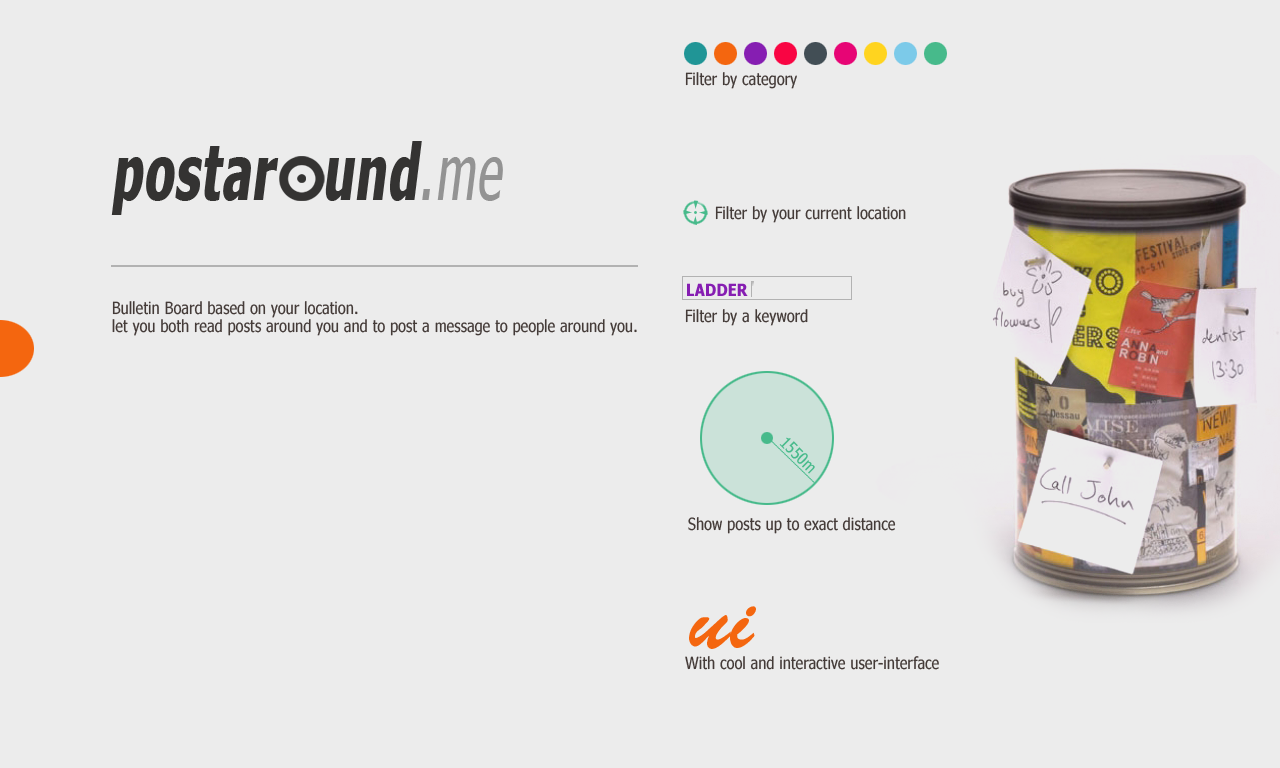
<style>
.page{position:relative;width:1280px;height:768px;background:#ececec}
.page>*{position:absolute;margin:0}
.t1{font:16.7px "Nina";letter-spacing:0.012em;color:#443b38}
.t2{font:16.7px "Nina-Bold";letter-spacing:0.012em;color:#861eb2}
.t3{font:16.7px/18px "Nina";letter-spacing:0.012em;color:#443b38}
.t4{font:16.7px "Nina";letter-spacing:0.012em;color:#47ba8b}
.t5{font:83.3px "BrushScriptStd";letter-spacing:0.012em;color:#f4660f}
</style>
<div class="page">
<p class="t1" style="left:685px;top:72px;width:112px;height:17px">Filter by category</p>
<p class="t1" style="left:715px;top:206px;width:191px;height:17px">Filter by your current location</p>
<p class="t2" style="left:687px;top:283px;width:61px;height:13px">LADDER</p>
<p class="t3" style="left:112px;top:301px;width:525px;height:35px;text-align:justify">Bulletin Board based on your location.<br>let you both read posts around you and to post a message to people around you.</p>
<p class="t1" style="left:685px;top:309px;width:123px;height:17px">Filter by a keyword</p>
<p class="t4" style="left:779px;top:437px;width:36px;height:37px;rotate:45deg">1550m</p>
<p class="t1" style="left:688px;top:517px;width:208px;height:17px">Show posts up to exact distance</p>
<p class="t5" style="left:689px;top:606px;width:67px;height:43px">ui</p>
<p class="t1" style="left:685px;top:656px;width:254px;height:14px">With cool and interactive user-interface</p>
</div>
